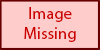
<style>
.page{position:relative;width:100px;height:50px;background:#ffcccc}
.page>*{position:absolute;margin:0}
.t1{font:16.7px "MyriadPro-Regular";color:#cc0000}
</style>
<div class="page">
<p class="t1" style="left:24px;top:7px;width:52px;height:35px;text-align:center">Image<br>Missing</p>
</div>
